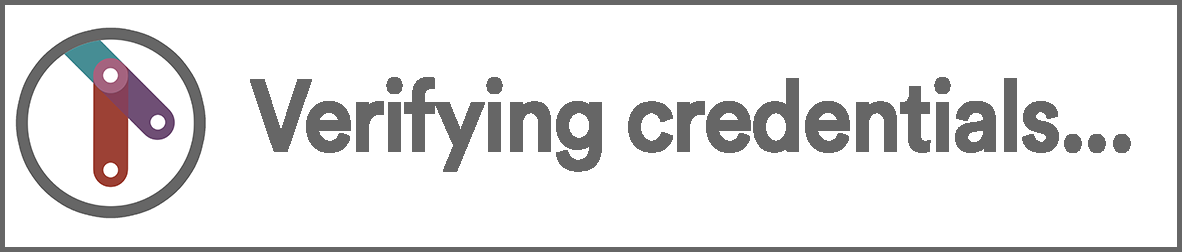
<style>
.page{position:relative;width:1182px;height:252px;background:#ffffff}
.page>*{position:absolute;margin:0}
.t1{font:100px "CircularStd-Medium";letter-spacing:-0.05em;color:#666666;font-weight:bold;scale:0.9 1}
</style>
<div class="page">
<p class="t1" style="left:250px;top:77px;width:881px;height:95px">Verifying credentials...</p>
</div>
